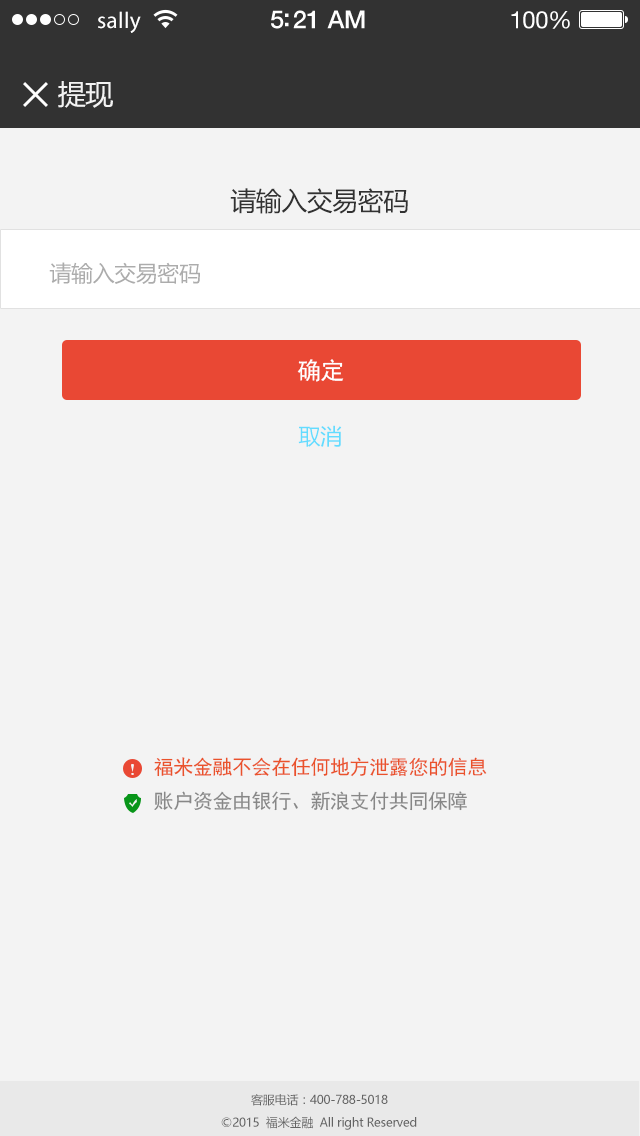
<style>
.page{position:relative;width:640px;height:1136px;background:#f3f3f3}
.page>*{position:absolute;margin:0}
.t1{font:23px "MyriadPro-Regular";letter-spacing:0.02em;color:#ffffff}
.t2{font:25px "HelveticaNeue-Medium";letter-spacing:-0.02em;color:#ffffff}
.t3{font:24px "HelveticaNeue";letter-spacing:-0.02em;color:#ffffff}
.t4{font:28px "MicrosoftYaHei";letter-spacing:-0.02em;color:#f3f3f3}
.t5{font:26px "MicrosoftYaHei";letter-spacing:-0.02em;color:#323232}
.t6{font:22px "MicrosoftYaHei";letter-spacing:-0.02em;color:#acacac}
.t7{font:24px "SimHei";letter-spacing:-0.02em;color:#ffffff}
.t8{font:22px "MicrosoftYaHei";letter-spacing:-0.02em;color:#63dcff}
.t9{font:20px "SimHei";letter-spacing:-0.02em;color:#ea522b}
.t10{font:20px "SimHei";letter-spacing:-0.02em;color:#878787}
.t11{font:12px "MicrosoftYaHei";letter-spacing:-0.02em;color:#646464}
</style>
<div class="page">
<p class="t1" style="left:98px;top:11px;width:43px;height:22px">sally</p>
<p class="t2" style="left:271px;top:10px;width:94px;height:19px">5:21 AM</p>
<p class="t3" style="left:511px;top:11px;width:59px;height:18px">100%</p>
<p class="t4" style="left:58px;top:81px;width:55px;height:27px">提现</p>
<p class="t5" style="left:230px;top:188px;width:178px;height:26px">请输入交易密码</p>
<p class="t6" style="left:49px;top:262px;width:151px;height:22px">请输入交易密码</p>
<p class="t7" style="left:297px;top:359px;width:47px;height:23px">确定</p>
<p class="t8" style="left:298px;top:425px;width:44px;height:22px">取消</p>
<p class="t9" style="left:154px;top:757px;width:333px;height:20px">福米金融不会在任何地方泄露您的信息</p>
<p class="t10" style="left:154px;top:791px;width:313px;height:20px">账户资金由银行、新浪支付共同保障</p>
<p class="t11" style="left:251px;top:1094px;width:137px;height:12px">客服电话：400-788-5018</p>
<p class="t11" style="left:221px;top:1116px;width:196px;height:14px">©2015  福米金融  All right Reserved</p>
</div>
